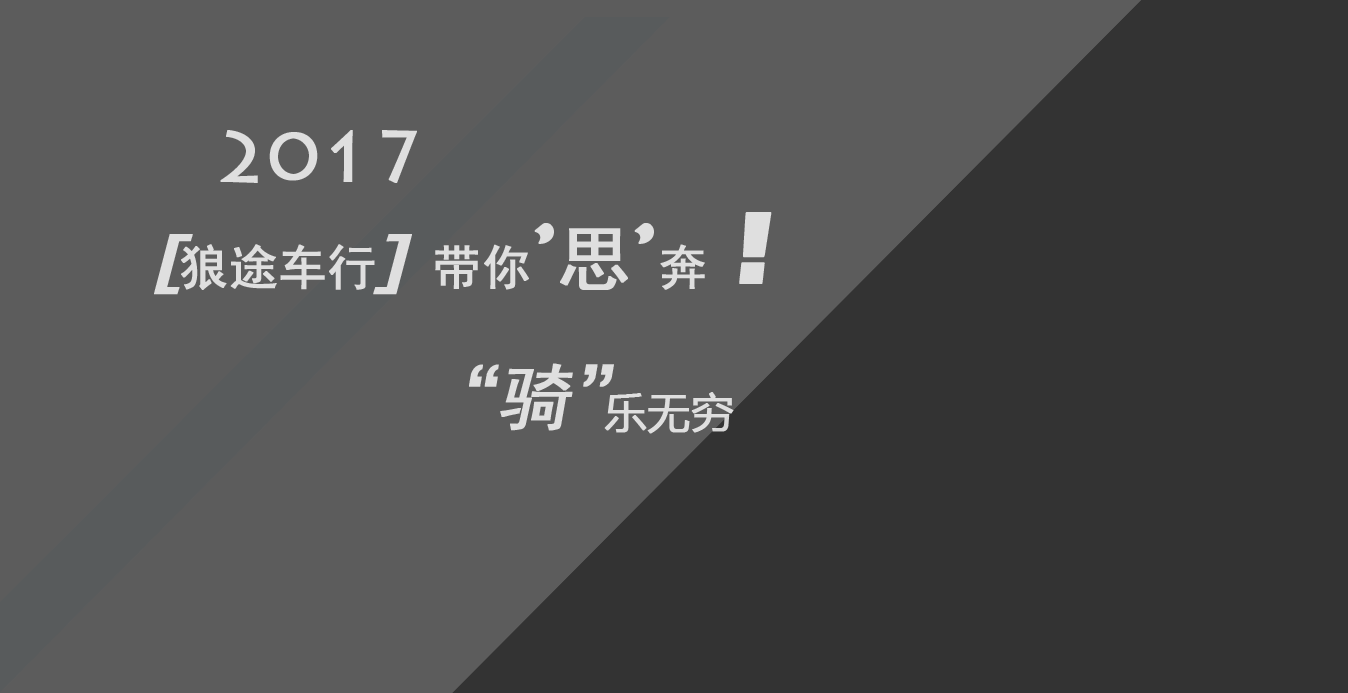
<style>
.page{position:relative;width:1348px;height:693px;background:#5c5c5c}
.page>*{position:absolute;margin:0}
.t1{font:72px "LithosPro-Regular";color:#dfdfdf;font-weight:bold}
.t2{font:48px "SimHei";color:#dfdfdf;font-weight:bold}
.t3{font:72px "BrushScriptStd";color:#dfdfdf;font-weight:bold}
.t4{font:72px "HoboStd";color:#dfdfdf;font-weight:bold}
.t5{font:72px "SimHei";color:#dfdfdf;font-weight:bold}
.t6{font:96.6px "BlackoakStd";color:#dfdfdf;font-style:italic;scale:0.62 1}
.t7{font:72px "SimHei";color:#dfdfdf;font-weight:bold;font-style:italic}
.t8{font:72px "MicrosoftYaHei";color:#dfdfdf;font-weight:bold}
</style>
<div class="page">
<p class="t1" style="left:220px;top:130px;width:197px;height:53px">2017</p>
<p class="t2" style="left:154px;top:212px;width:618px;height:83px"><span class="t3">[</span>狼途车行<span class="t3">] </span>带你<span class="t4">’</span><span class="t5">思</span><span class="t4">’</span>奔 <span class="t6">!</span></p>
<p class="t7" style="left:469px;top:363px;width:145px;height:68px">“骑”</p>
<p class="t8" style="left:604px;top:392px;width:130px;height:42px">乐无穷</p>
</div>
